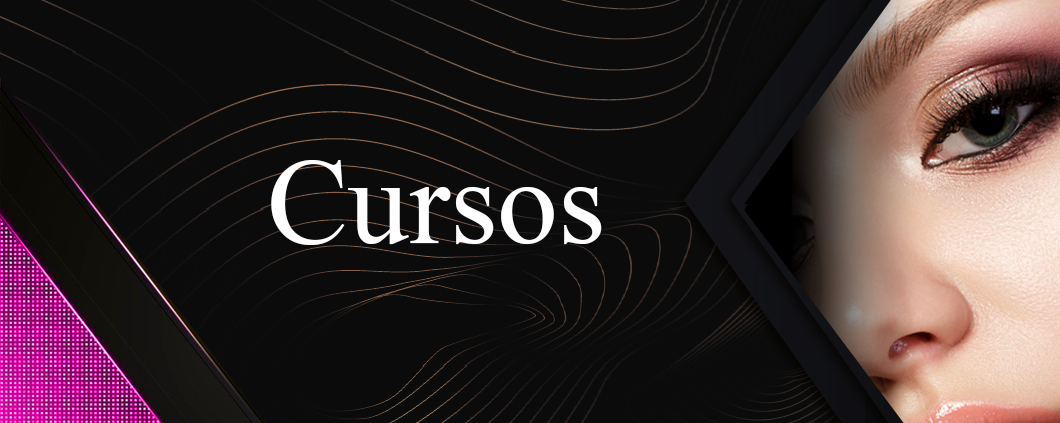
<style>
.page{position:relative;width:1060px;height:423px;background:#0b0b0b}
.page>*{position:absolute;margin:0}
.t1{font:122.2px "TimesNewRomanPSMT";color:#ffffff}
</style>
<div class="page">
<p class="t1" style="left:271px;top:160px;width:331px;height:85px">Cursos</p>
</div>
